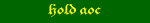
<style>
.page{position:relative;width:150px;height:23px;background:#006600}
.page>*{position:absolute;margin:0}
.t1{font:24px "Parchment-Regular";color:#f6f91a;scale:1.56 1}
</style>
<div class="page">
<p class="t1" style="left:48px;top:4px;width:53px;height:13px">hold aoc</p>
</div>
